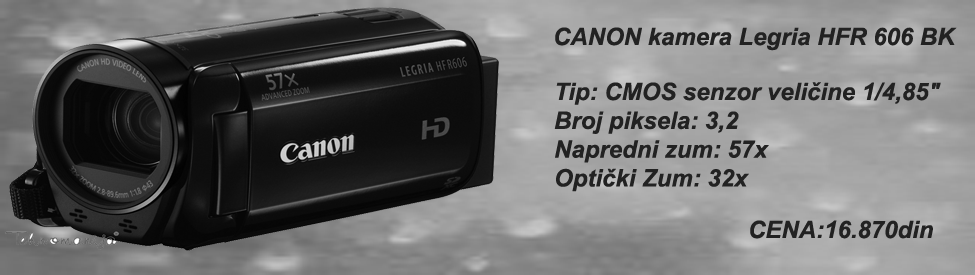
<style>
.page{position:relative;width:975px;height:275px}
.page>*{position:absolute;margin:0}
.t1{font:24px "Arial-BoldItalicMT";color:#222222}
</style>
<div class="page">
<p class="t1" style="left:555px;top:27px;width:402px;height:24px">CANON kamera Legria HFR 606 BK</p>
<p class="t1" style="left:554px;top:82px;width:387px;height:110px">Tip: CMOS senzor veličine 1/4,85"    <br>Broj piksela: 3,2<br>Napredni zum: 57x    <br>Optički Zum: 32x</p>
<p class="t1" style="left:750px;top:220px;width:183px;height:19px">CENA:16.870din</p>
</div>
